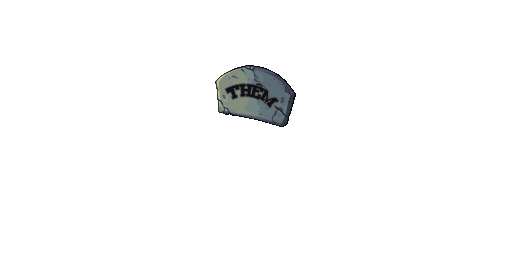
<style>
.page{position:relative;width:512px;height:256px;background:#ffffff}
.page>*{position:absolute;margin:0}
.t1{font:13.1px "SVN-Zero";color:#101018}
</style>
<div class="page">
<p class="t1" style="left:225px;top:83px;width:54px;height:25px;rotate:12deg">Thêm</p>
</div>
